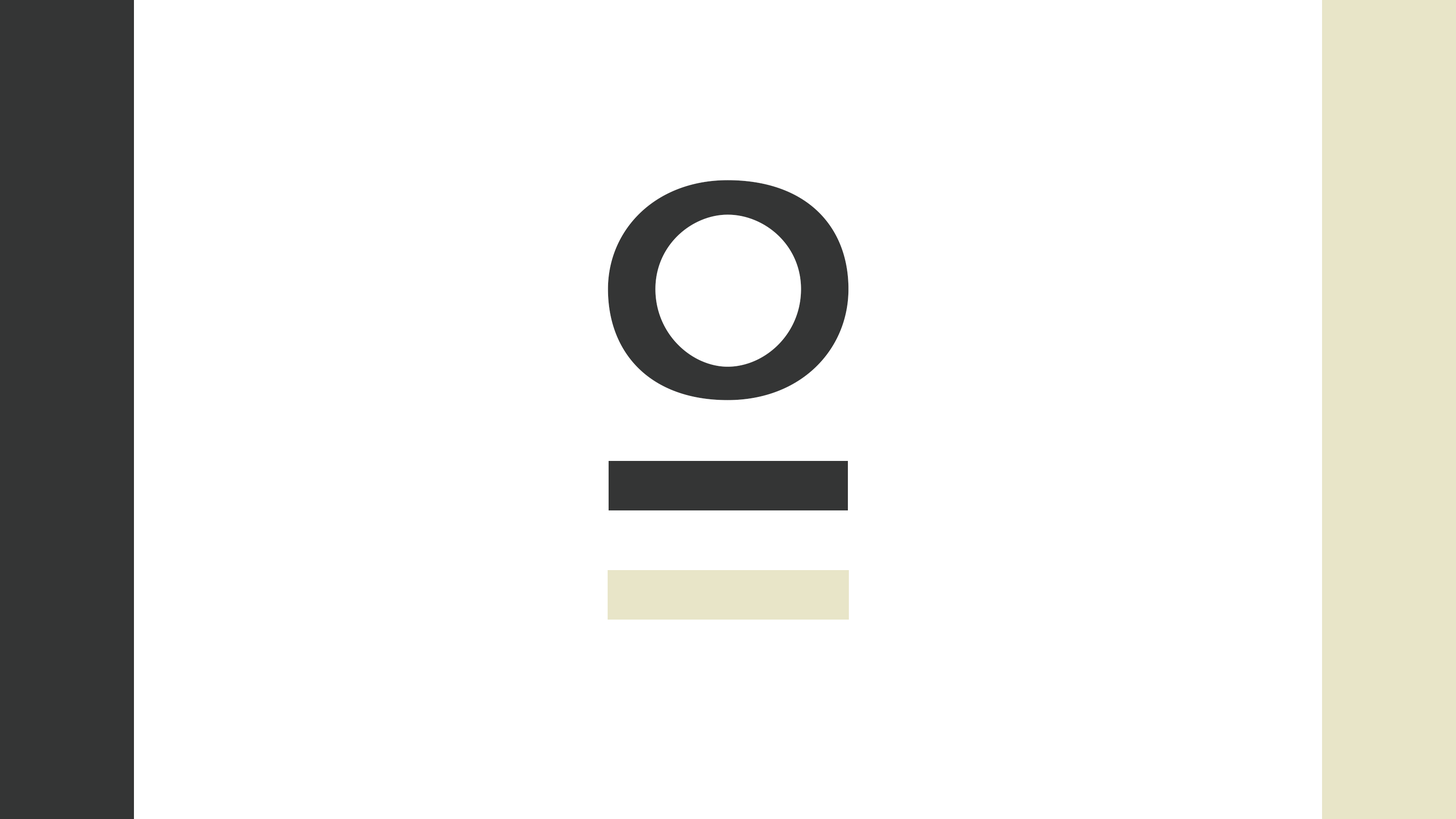
<style>
.page{position:relative;width:1456px;height:819px;background:#ffffff}
.page>*{position:absolute;margin:0}
.t1{font:1078.3px "ACaslonPro-Regular";letter-spacing:0.1em;color:#343535}
</style>
<div class="page">
<p class="t1" style="left:608px;top:180px;width:241px;height:220px">°</p>
</div>
